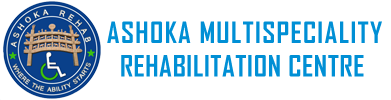
<style>
.page{position:relative;width:391px;height:100px;background:#ffffff}
.page>*{position:absolute;margin:0}
.t1{font:28px "AgencyFB-Bold";letter-spacing:0.05em;color:#008fd5}
.t2{font:28px "AgencyFB-Bold";letter-spacing:0.025em;color:#008fd5}
</style>
<div class="page">
<p class="t1" style="left:107px;top:21px;width:275px;height:56px">ASHOKA MULTISPECIALITY<br><span class="t2">  REHABILITATION CENTRE</span></p>
</div>
